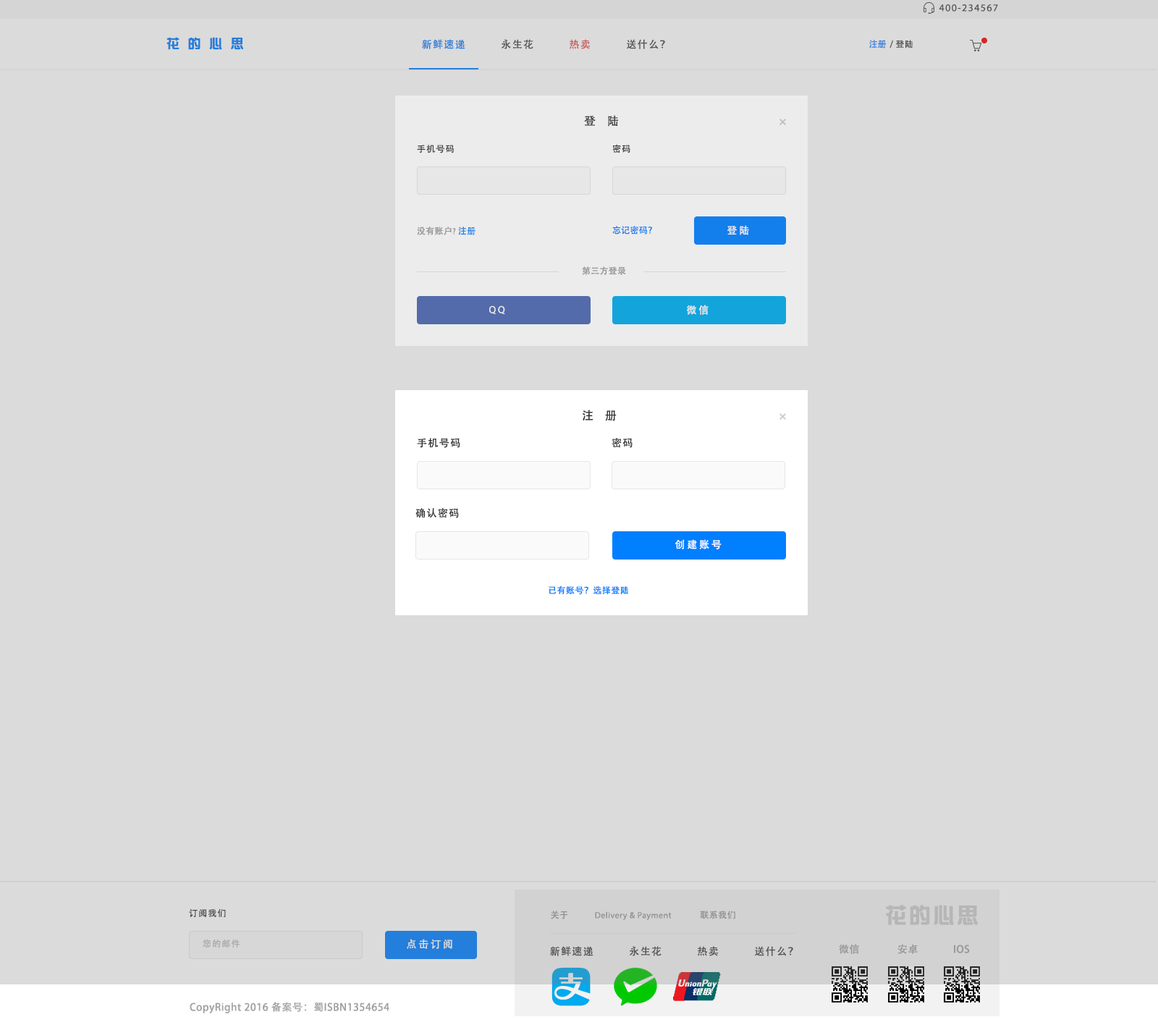
<style>
.page{position:relative;width:1158px;height:1030px;background:#dbdbdb}
.page>*{position:absolute;margin:0}
.t1{font:10.1px "MyriadPro-Regular";letter-spacing:0.1em;color:#444444}
.t2{font:13px "DFZongYi-Bd-80-Win-GB";letter-spacing:0.64em;color:#237fdb}
.t3{font:10.1px "AdobeHeitiStd-Regular";letter-spacing:0.1em}
.t4{font:10.1px "AdobeHeitiStd-Regular";letter-spacing:0.1em;text-transform:uppercase}
.t5{font:8.7px "AdobeHeitiStd-Regular";letter-spacing:0.04em}
.t6{font:8.7px "AdobeHeitiStd-Regular"}
.t7{font:11.6px "AdobeHeitiStd-Regular";letter-spacing:0.02em;color:#333333}
.t8{font:8.7px "AdobeHeitiStd-Regular";letter-spacing:0.1em;color:#333333;text-transform:uppercase}
.t9{font:8.7px "AdobeHeitiStd-Regular";letter-spacing:0.02em;color:#999999}
.t10{font:8.7px "MyriadPro-Regular";letter-spacing:0.02em;color:#999999}
.t11{font:8.7px "AdobeHeitiStd-Regular";letter-spacing:0.02em;color:#007fff}
.t12{font:10.1px "AdobeHeitiStd-Regular";letter-spacing:0.2em;color:#ffffff;text-transform:uppercase}
.t13{font:10.1px "MyriadPro-Regular";letter-spacing:0.2em;color:#ffffff;text-transform:uppercase}
.t14{font:10.1px "AdobeHeitiStd-Regular";letter-spacing:0.1em;color:#333333;text-transform:uppercase}
.t15{font:8.7px "AdobeHeitiStd-Regular";letter-spacing:0.04em;color:#007fff}
.t16{font:21.7px "DFZongYi-Bd-80-Win-GB";letter-spacing:0.1em;color:#cccccc}
.t17{font:8.7px "MyriadPro-Regular";letter-spacing:0.04em;color:#999999}
.t18{font:8.7px "AdobeHeitiStd-Regular";letter-spacing:0.04em;color:#999999}
.t19{font:8.7px "AdobeHeitiStd-Regular";letter-spacing:0.1em;color:#bbbbbb}
.t20{font:10.1px "AdobeHeitiStd-Regular";letter-spacing:0.2em;color:#dbdbdb;text-transform:uppercase}
.t21{font:10.1px "AdobeHeitiStd-Regular";letter-spacing:0.1em;color:#444444}
.t22{font:10.1px "AdobeHeitiStd-Regular";letter-spacing:0.04em;color:#a5a0a0}
</style>
<div class="page">
<p class="t1" style="left:939px;top:4px;width:59px;height:8px">400-234567</p>
<p class="t2" style="left:166px;top:37px;width:77px;height:13px">花的心思</p>
<p class="t3" style="left:422px;top:39px;width:243px;height:10px">新鲜速递           永生花           <span class="t4">热卖           </span>送什么？</p>
<p class="t5" style="left:869px;top:40px;width:44px;height:8px"><span class="t6">注册 </span>/ 登陆</p>
<p class="t7" style="left:584px;top:115px;width:34px;height:12px">登    陆</p>
<p class="t8" style="left:417px;top:145px;width:37px;height:8px">手机号码</p>
<p class="t8" style="left:612px;top:144px;width:18px;height:9px">密码</p>
<p class="t9" style="left:417px;top:227px;width:58px;height:8px">没有账户<span class="t10">? </span><span class="t11">注册</span></p>
<p class="t11" style="left:612px;top:226px;width:40px;height:8px">忘记密码？</p>
<p class="t12" style="left:727px;top:225px;width:22px;height:10px">登陆</p>
<p class="t9" style="left:582px;top:266px;width:44px;height:9px">第三方登录</p>
<p class="t13" style="left:489px;top:305px;width:16px;height:9px">QQ</p>
<p class="t12" style="left:687px;top:305px;width:21px;height:10px">微信</p>
<p class="t7" style="left:583px;top:410px;width:34px;height:11px">注    册</p>
<p class="t14" style="left:417px;top:438px;width:43px;height:10px">手机号码</p>
<p class="t14" style="left:612px;top:438px;width:21px;height:10px">密码</p>
<p class="t14" style="left:415px;top:508px;width:44px;height:10px">确认密码</p>
<p class="t12" style="left:675px;top:539px;width:47px;height:10px">创建账号</p>
<p class="t15" style="left:549px;top:585px;width:79px;height:10px">已有账号？选择登陆</p>
<p class="t16" style="left:886px;top:905px;width:92px;height:20px">花的心思</p>
<p class="t8" style="left:189px;top:909px;width:37px;height:8px">订阅我们</p>
<p class="t17" style="left:551px;top:910px;width:184px;height:11px"><span class="t18">关于</span>            Delivery &amp; Payment             <span class="t18">联系我们</span></p>
<p class="t19" style="left:203px;top:939px;width:37px;height:9px">您的邮件</p>
<p class="t20" style="left:407px;top:939px;width:45px;height:10px">点击订阅</p>
<p class="t21" style="left:550px;top:946px;width:243px;height:10px">新鲜速递           永生花           热卖           送什么？</p>
<p class="t22" style="left:839px;top:944px;width:131px;height:10px">微信              安卓             IOS</p>
<p class="t22" style="left:190px;top:1002px;width:199px;height:11px">CopyRight 2016 备案号：蜀ISBN1354654</p>
</div>
